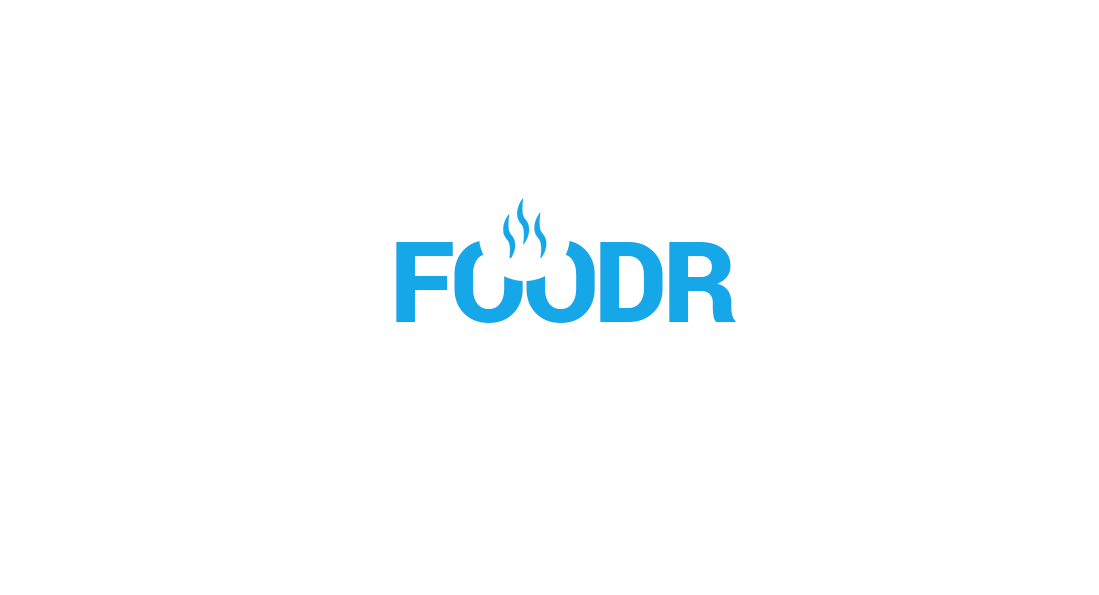
<style>
.page{position:relative;width:1099px;height:595px;background:#ffffff}
.page>*{position:absolute;margin:0}
.t1{font:113.3px "Roboto-Black";letter-spacing:-0.045em;color:#15a7e7}
</style>
<div class="page">
<p class="t1" style="left:396px;top:240px;width:340px;height:83px">FOODR</p>
</div>
